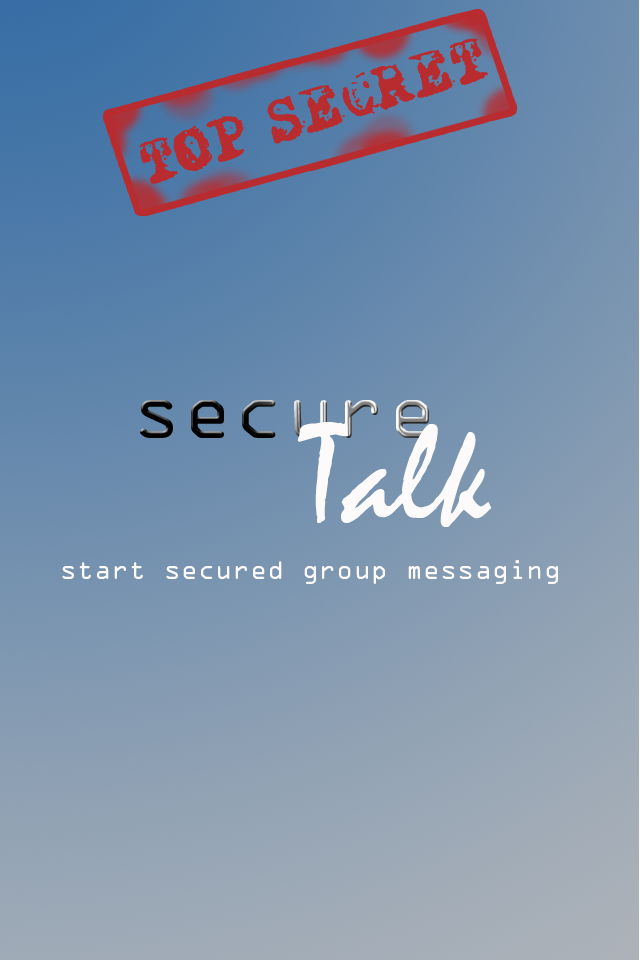
<style>
.page{position:relative;width:640px;height:960px}
.page>*{position:absolute;margin:0}
.t1{font:62px "X-Classified";color:#b82b2e}
.t2{font:71px "OCRAStd"}
.t3{font:141.7px "Mistral";color:#fcfafa}
.t4{font:24px "OCRAStd";color:#fcfafa}
</style>
<div class="page">
<p class="t1" style="left:139px;top:38px;width:349px;height:146px;rotate:-18deg">TOP SECRET</p>
<p class="t2" style="left:140px;top:400px;width:289px;height:38px">secure</p>
<p class="t3" style="left:297px;top:422px;width:195px;height:105px">Talk</p>
<p class="t4" style="left:62px;top:560px;width:496px;height:24px">start secured group messaging</p>
</div>
